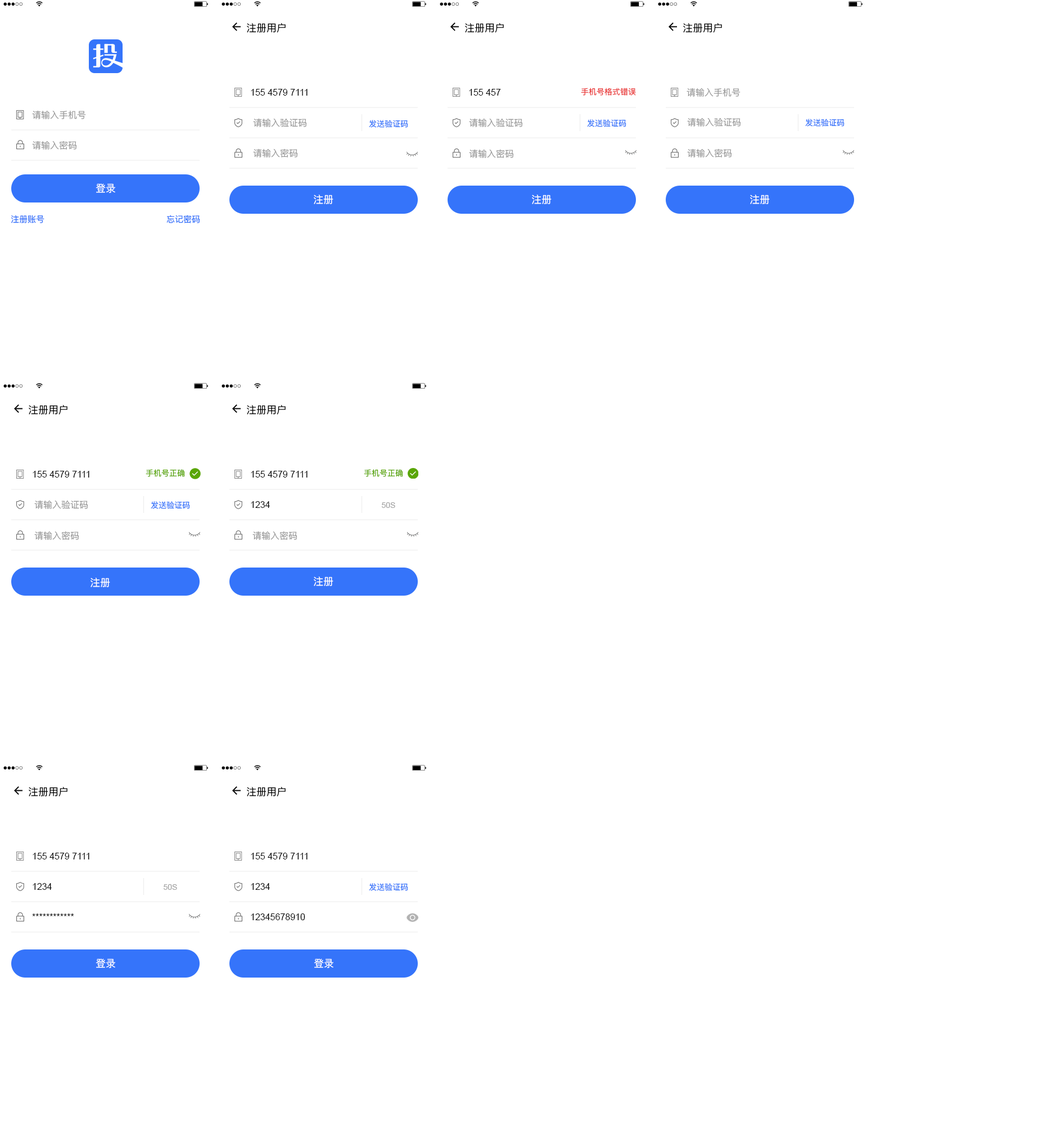
<style>
.page{position:relative;width:1061px;height:1139px;background:#ffffff}
.page>*{position:absolute;margin:0}
.t1{font:10.1px "PingFangSC-Regular";color:#000000}
.t2{font:9px "ArialMT";color:#000000}
.t3{font:7.9px "PingFangSC-Regular";color:#ea3a3a}
.t4{font:9px "PingFangSC-Regular";color:#999999}
.t5{font:7.9px "PingFangSC-Regular";color:#3574fa}
.t6{font:10.1px "PingFangSC-Regular";color:#ffffff}
.t7{font:8.4px "PingFangSC-Regular";color:#3574fa}
.t8{font:7.9px "PingFangSC-Regular";color:#5aa607}
.t9{font:7.9px "ArialMT";color:#a1a1a1}
</style>
<div class="page">
<p class="t1" style="left:247px;top:23px;width:39px;height:10px">注册用户</p>
<p class="t1" style="left:465px;top:23px;width:39px;height:10px">注册用户</p>
<p class="t1" style="left:683px;top:23px;width:39px;height:10px">注册用户</p>
<p class="t2" style="left:251px;top:89px;width:57px;height:7px">155 4579 7111</p>
<p class="t2" style="left:469px;top:89px;width:32px;height:7px">155 457</p>
<p class="t3" style="left:581px;top:88px;width:55px;height:8px">手机号格式错误</p>
<p class="t4" style="left:687px;top:88px;width:54px;height:9px">请输入手机号</p>
<p class="t4" style="left:32px;top:110px;width:54px;height:9px">请输入手机号</p>
<p class="t4" style="left:253px;top:118px;width:54px;height:9px">请输入验证码</p>
<p class="t5" style="left:369px;top:120px;width:39px;height:8px">发送验证码</p>
<p class="t4" style="left:469px;top:118px;width:54px;height:9px">请输入验证码</p>
<p class="t5" style="left:587px;top:119px;width:40px;height:8px">发送验证码</p>
<p class="t4" style="left:687px;top:118px;width:54px;height:9px">请输入验证码</p>
<p class="t5" style="left:806px;top:119px;width:39px;height:8px">发送验证码</p>
<p class="t4" style="left:32px;top:141px;width:44px;height:9px">请输入密码</p>
<p class="t4" style="left:253px;top:148px;width:45px;height:10px">请输入密码</p>
<p class="t4" style="left:469px;top:149px;width:45px;height:9px">请输入密码</p>
<p class="t4" style="left:687px;top:148px;width:45px;height:10px">请输入密码</p>
<p class="t6" style="left:96px;top:183px;width:19px;height:10px">登录</p>
<p class="t6" style="left:314px;top:195px;width:20px;height:9px">注册</p>
<p class="t6" style="left:532px;top:195px;width:20px;height:9px">注册</p>
<p class="t6" style="left:750px;top:195px;width:20px;height:9px">注册</p>
<p class="t7" style="left:11px;top:215px;width:33px;height:8px">注册账号</p>
<p class="t7" style="left:166px;top:215px;width:34px;height:8px">忘记密码</p>
<p class="t1" style="left:29px;top:405px;width:39px;height:10px">注册用户</p>
<p class="t1" style="left:247px;top:405px;width:39px;height:10px">注册用户</p>
<p class="t2" style="left:33px;top:471px;width:56px;height:7px">155 4579 7111</p>
<p class="t8" style="left:146px;top:469px;width:38px;height:8px">手机号正确</p>
<p class="t2" style="left:251px;top:471px;width:57px;height:7px">155 4579 7111</p>
<p class="t8" style="left:364px;top:469px;width:39px;height:8px">手机号正确</p>
<p class="t4" style="left:34px;top:500px;width:54px;height:9px">请输入验证码</p>
<p class="t5" style="left:151px;top:501px;width:39px;height:8px">发送验证码</p>
<p class="t2" style="left:251px;top:501px;width:19px;height:7px">1234</p>
<p class="t9" style="left:382px;top:502px;width:13px;height:6px">50S</p>
<p class="t4" style="left:34px;top:531px;width:45px;height:9px">请输入密码</p>
<p class="t4" style="left:253px;top:531px;width:44px;height:9px">请输入密码</p>
<p class="t6" style="left:91px;top:578px;width:19px;height:9px">注册</p>
<p class="t6" style="left:314px;top:577px;width:20px;height:9px">注册</p>
<p class="t1" style="left:29px;top:787px;width:39px;height:9px">注册用户</p>
<p class="t1" style="left:247px;top:787px;width:39px;height:9px">注册用户</p>
<p class="t2" style="left:33px;top:853px;width:56px;height:7px">155 4579 7111</p>
<p class="t2" style="left:251px;top:853px;width:57px;height:7px">155 4579 7111</p>
<p class="t2" style="left:33px;top:883px;width:19px;height:7px">1234</p>
<p class="t9" style="left:164px;top:884px;width:13px;height:6px">50S</p>
<p class="t2" style="left:251px;top:883px;width:19px;height:7px">1234</p>
<p class="t5" style="left:369px;top:883px;width:39px;height:8px">发送验证码</p>
<p class="t2" style="left:32px;top:914px;width:42px;height:2px">************</p>
<p class="t2" style="left:251px;top:914px;width:54px;height:6px">12345678910</p>
<p class="t6" style="left:96px;top:958px;width:19px;height:10px">登录</p>
<p class="t6" style="left:314px;top:958px;width:20px;height:10px">登录</p>
</div>
